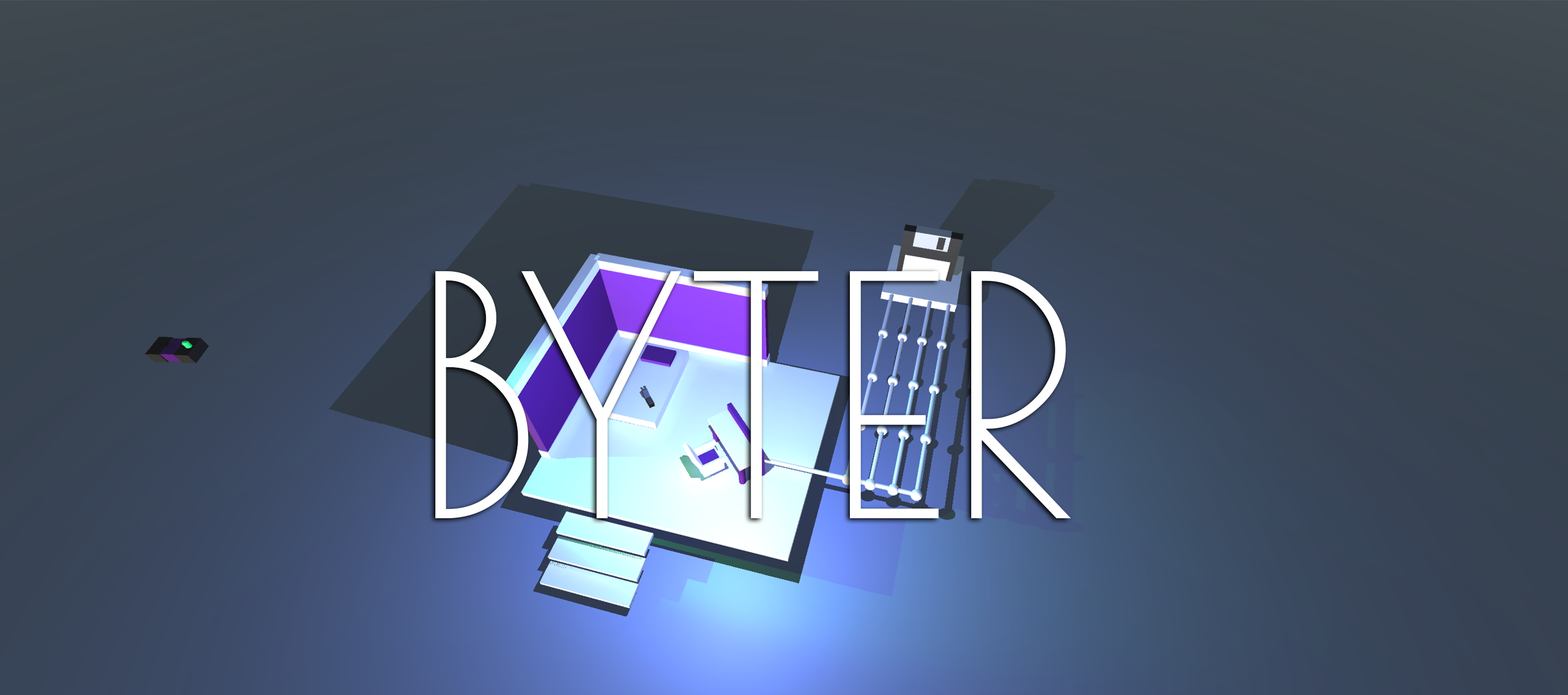
<style>
.page{position:relative;width:1568px;height:695px}
.page>*{position:absolute;margin:0}
.t1{font:329.4px "PoiretOne-Regular";color:#ffffff}
</style>
<div class="page">
<p class="t1" style="left:435px;top:271px;width:636px;height:247px">BYTER</p>
</div>
